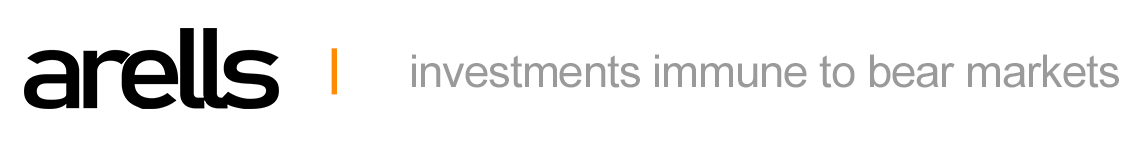
<style>
.page{position:relative;width:1145px;height:144px;background:#ffffff}
.page>*{position:absolute;margin:0}
.t1{font:49.3px "Arial-BoldMT";letter-spacing:-0.02em;color:#ff8b00;scale:1.06 1}
.t2{font:45.2px "ArialMT";letter-spacing:-0.02em;color:#9a9a9a}
</style>
<div class="page">
<p class="t1" style="left:331px;top:48px;width:6px;height:47px">|</p>
<p class="t2" style="left:412px;top:54px;width:707px;height:34px">investments immune to bear markets</p>
</div>
